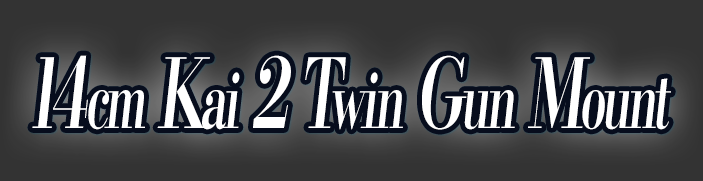
<style>
.page{position:relative;width:703px;height:181px;background:#333333}
.page>*{position:absolute;margin:0}
.t1{font:76.8px "KochoStd-Heavy";letter-spacing:-0.08em;color:#ffffff;font-style:italic;scale:0.62 1}
.t2{font:96px "KochoStd-Heavy";letter-spacing:-0.08em;color:#ffffff;font-style:italic;scale:0.62 1}
</style>
<div class="page">
<p class="t1" style="left:32px;top:55px;width:639px;height:75px"><span class="t2">14</span>cm<span class="t2"> K</span>ai<span class="t2"> 2 T</span>win<span class="t2"> G</span>un<span class="t2"> M</span>ount</p>
</div>
